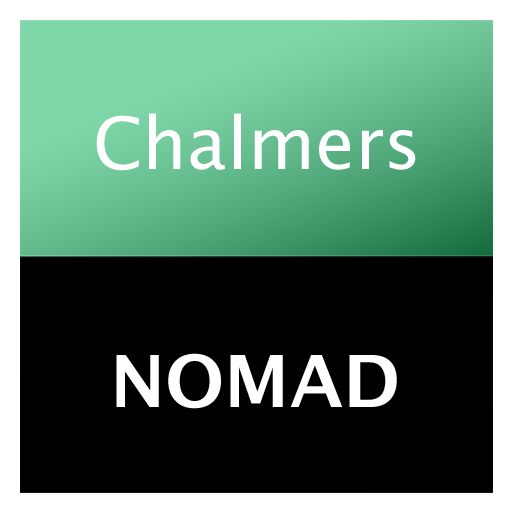
<style>
.page{position:relative;width:512px;height:512px;background:#000000}
.page>*{position:absolute;margin:0}
.t1{font:72px "LucidaGrande";color:#ffffff}
.t2{font:72px "LucidaGrande-Bold";color:#ffffff;text-transform:uppercase}
</style>
<div class="page">
<p class="t1" style="left:96px;top:113px;width:320px;height:58px">Chalmers</p>
<p class="t2" style="left:116px;top:353px;width:281px;height:56px">Nomad</p>
</div>
